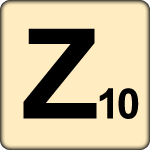
<style>
.page{position:relative;width:150px;height:150px;background:#ffecc1}
.page>*{position:absolute;margin:0}
.t1{font:41.7px "Arial-BoldMT";color:#000000}
.t2{font:125px "Arial-BoldMT";color:#000000}
</style>
<div class="page">
<p class="t1" style="left:23px;top:28px;width:116px;height:91px"><span class="t2">Z</span>10</p>
</div>
